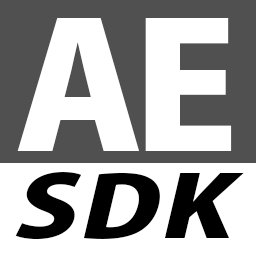
<style>
.page{position:relative;width:256px;height:256px;background:#ffffff}
.page>*{position:absolute;margin:0}
.t1{font:172.4px "KozGoPr6N-Heavy";letter-spacing:-0.06em;color:#ffffff;scale:1.13 1}
.t2{font:83.8px "KozGoPr6N-Heavy";letter-spacing:0.025em;color:#000000;font-style:italic;scale:1.34 1}
</style>
<div class="page">
<p class="t1" style="left:17px;top:18px;width:215px;height:133px">AE</p>
<p class="t2" style="left:15px;top:172px;width:229px;height:68px">SDK</p>
</div>
